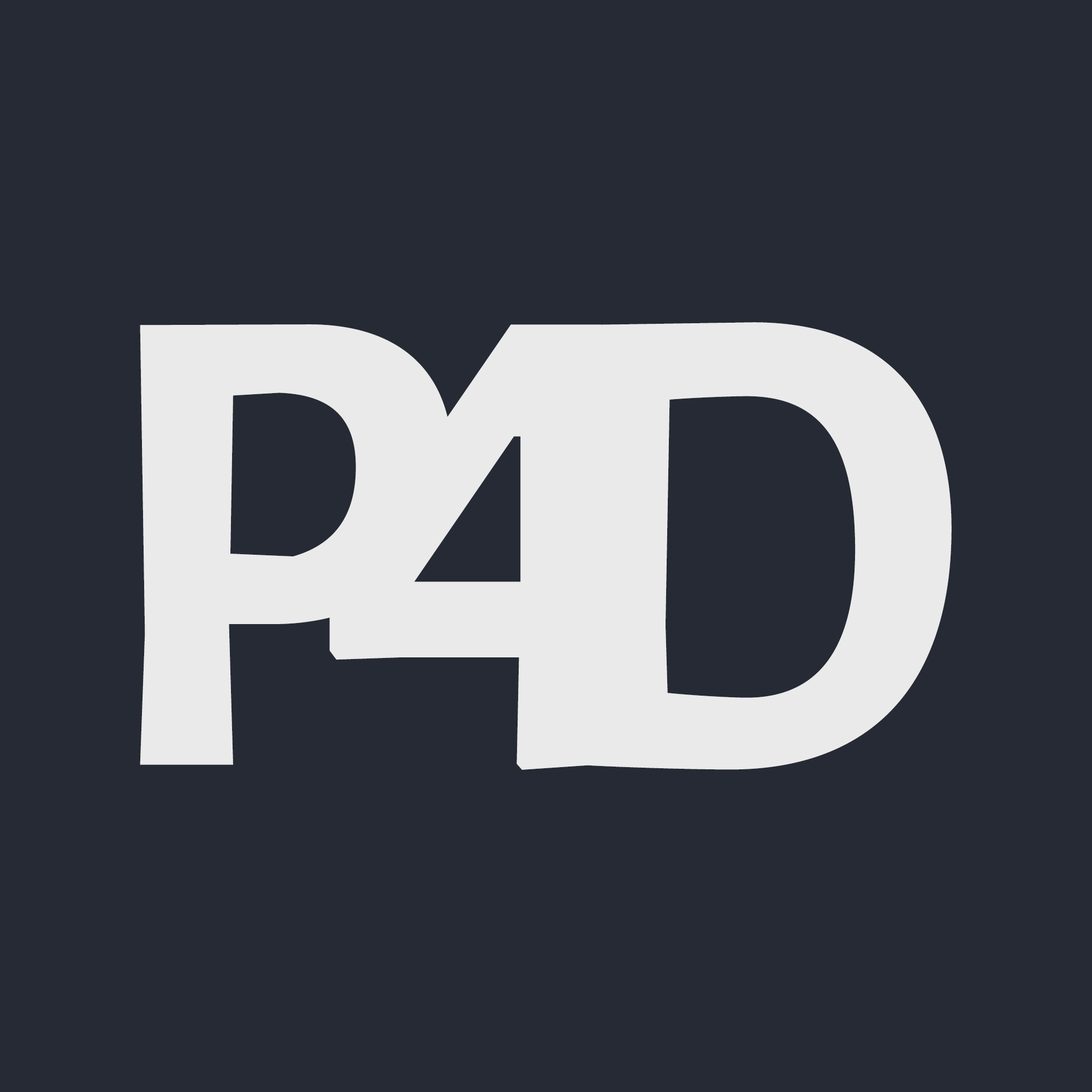
<style>
.page{position:relative;width:1092px;height:1092px;background:#252a34}
.page>*{position:absolute;margin:0}
.t1{font:682.5px "AlegreyaSans-Bold";letter-spacing:-0.22em;color:#eaeaea}
.t2{font:739.4px "AlegreyaSans-Bold";letter-spacing:-0.22em;color:#eaeaea}
</style>
<div class="page">
<p class="t1" style="left:140px;top:322px;width:812px;height:448px">P<span class="t2">4</span>D</p>
</div>
